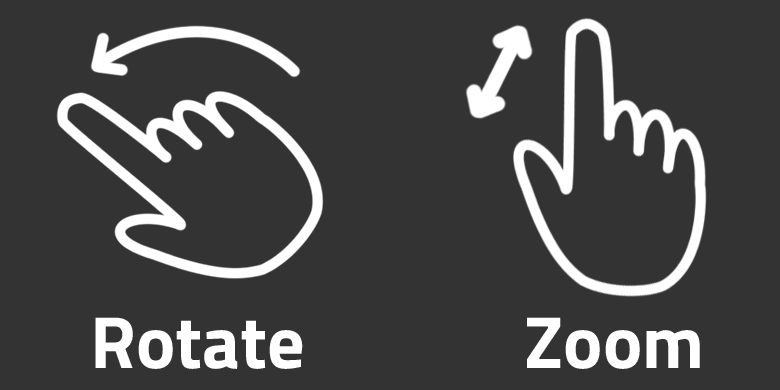
<style>
.page{position:relative;width:780px;height:390px;background:#333333}
.page>*{position:absolute;margin:0}
.t1{font:74.1px "TitilliumWeb-Bold";color:#ffffff}
</style>
<div class="page">
<p class="t1" style="left:95px;top:317px;width:208px;height:52px">Rotate</p>
<p class="t1" style="left:527px;top:317px;width:173px;height:52px">Zoom</p>
</div>
